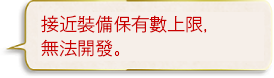
<style>
.page{position:relative;width:274px;height:78px;background:#f6efe9}
.page>*{position:absolute;margin:0}
.t1{font:18px/24px "GothicMB101Pr6N-Light";color:#c90000}
</style>
<div class="page">
<p class="t1" style="left:41px;top:15px;width:166px;height:42px">接近裝備保有數上限，<br>無法開發。</p>
</div>
